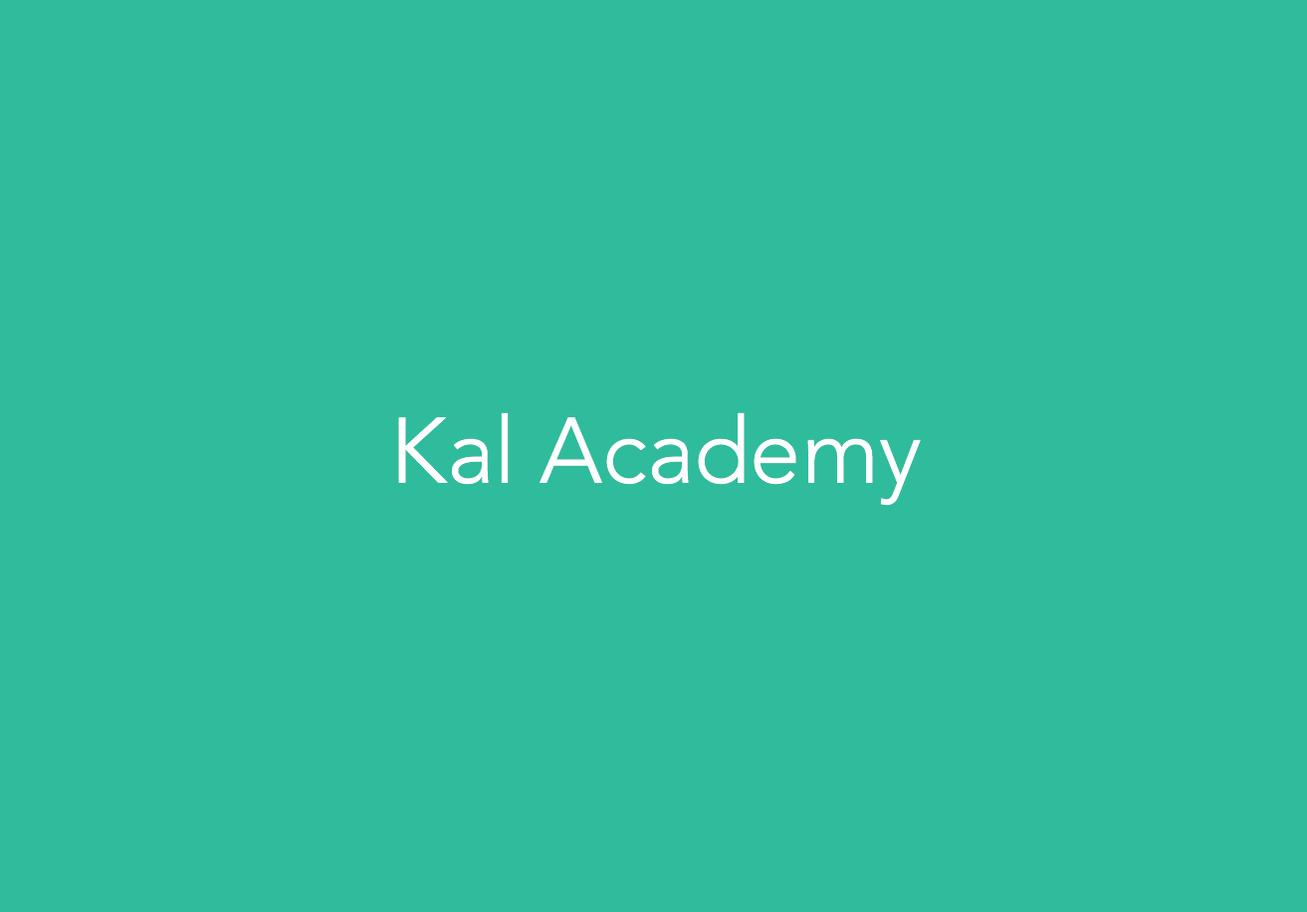
<style>
.page{position:relative;width:1307px;height:912px;background:#2fbc9c}
.page>*{position:absolute;margin:0}
.t1{font:91.6px "Avenir-Light";color:#fefefe}
</style>
<div class="page">
<p class="t1" style="left:398px;top:412px;width:523px;height:94px">Kal Academy</p>
</div>
